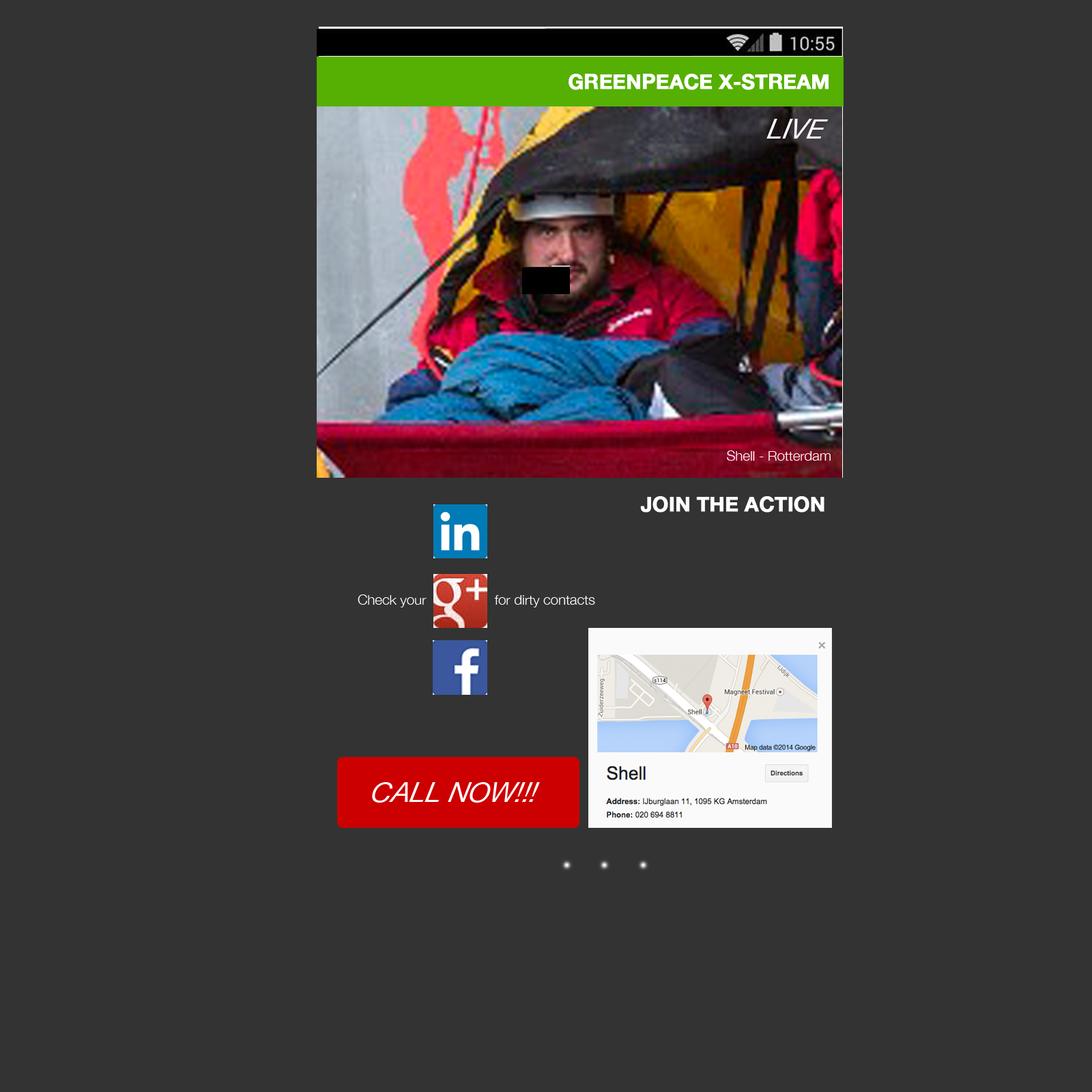
<style>
.page{position:relative;width:1092px;height:1092px;background:#333333}
.page>*{position:absolute;margin:0}
.t1{font:20.5px "HelveticaNeue-Bold";letter-spacing:-0.01em;color:#ffffff;text-transform:uppercase;font-weight:bold}
.t2{font:27.3px "HelveticaNeue-Italic";letter-spacing:-0.01em;color:#ffffff;text-transform:uppercase;font-style:italic;scale:1.04 1}
.t3{font:13.7px "HelveticaNeue-Light";letter-spacing:-0.01em;color:#ffffff;scale:1.04 1}
</style>
<div class="page">
<p class="t1" style="left:569px;top:74px;width:260px;height:16px">Greenpeace x-stream</p>
<p class="t2" style="left:766px;top:119px;width:63px;height:20px">live</p>
<p class="t3" style="left:727px;top:450px;width:104px;height:11px">Shell - Rotterdam</p>
<p class="t1" style="left:640px;top:496px;width:184px;height:17px">join the action</p>
<p class="t3" style="left:358px;top:594px;width:237px;height:13px">Check your                  for dirty contacts</p>
<p class="t2" style="left:372px;top:782px;width:168px;height:21px">call now!!!</p>
</div>
